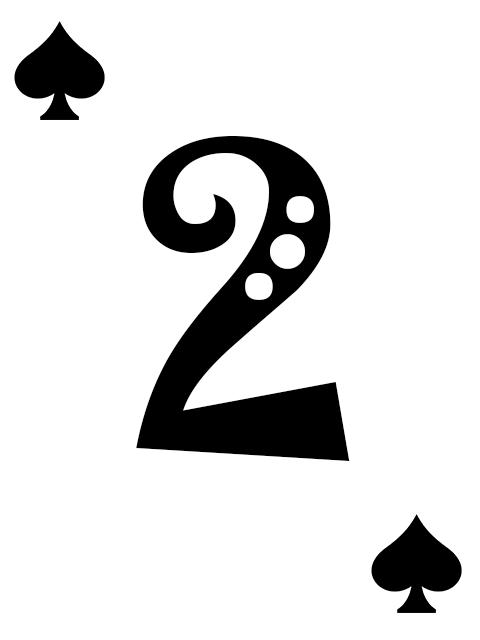
<style>
.page{position:relative;width:480px;height:640px;background:#ffffff}
.page>*{position:absolute;margin:0}
.t1{font:386.3px "Jokerman-Regular";color:#000000}
</style>
<div class="page">
<p class="t1" style="left:136px;top:136px;width:214px;height:325px">2</p>
</div>
